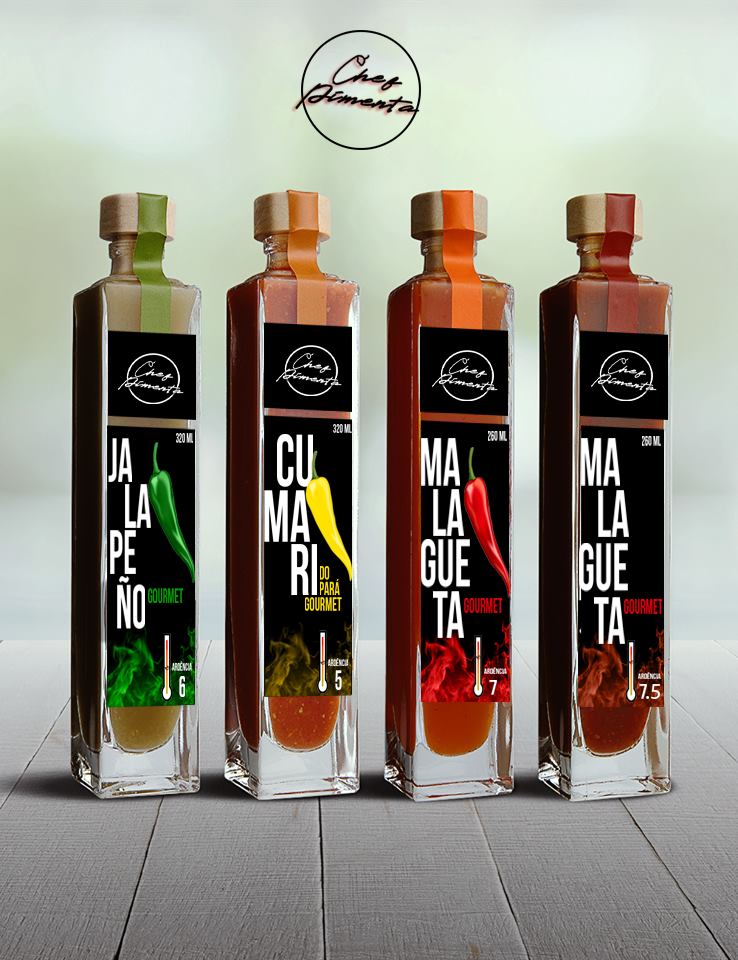
<style>
.page{position:relative;width:738px;height:960px}
.page>*{position:absolute;margin:0}
.t1{font:12.3px "BebasNeueBold";color:#ffffff;scale:0.69 1}
.t2{font:62px "BebasNeueBold";color:#ffffff;scale:0.61 1}
.t3{font:13.3px "BebasNeueBold";color:#ffffff;scale:0.61 1}
.t4{font:73.4px "BebasNeueBold";color:#ffffff;scale:0.69 1}
.t5{font:66.6px "BebasNeueBold";color:#ffffff;scale:0.66 1}
.t6{font:13.4px "BebasNeueBold";color:#ffffff;scale:0.66 1}
.t7{font:19px/15.5px "BebasNeueBold";color:#ffe100;scale:0.69 1}
.t8{font:20.6px "BebasNeueBold";color:#00a000;scale:0.61 1}
.t9{font:19px "BebasNeueBold";color:#ffe100;scale:0.69 1}
.t10{font:20.7px "BebasNeueBold";color:#e2010c;scale:0.66 1}
.t11{font:10.8px "BebasNeueBold";color:#fbfcfb;scale:0.61 1}
.t12{font:10px "BebasNeueBold";color:#f6f5f1;scale:0.69 1}
.t13{font:29.9px "BebasNeueBold";color:#ffffff;scale:0.61 1}
.t14{font:27.5px "BebasNeueBold";color:#ffffff;scale:0.69 1}
.t15{font:7.6px "BebasNeueBold";color:#ffffff}
.t16{font:21px "BebasNeueBold";color:#ffffff}
.t17{font:22px "MyriadPro-Regular";color:#ffffff}
</style>
<div class="page">
<p class="t1" style="left:333px;top:424px;width:19px;height:9px;rotate:2deg">320 ml</p>
<p class="t2" style="left:108px;top:438px;width:24px;height:44px">JA</p>
<p class="t3" style="left:176px;top:433px;width:17px;height:10px">320 ml</p>
<p class="t4" style="left:277px;top:434px;width:36px;height:53px">cu</p>
<p class="t5" style="left:421px;top:438px;width:39px;height:48px">ma</p>
<p class="t6" style="left:488px;top:431px;width:19px;height:10px">260 ml</p>
<p class="t5" style="left:581px;top:438px;width:39px;height:48px">ma</p>
<p class="t6" style="left:642px;top:436px;width:19px;height:10px">260 ml</p>
<p class="t2" style="left:125px;top:484px;width:26px;height:44px">la</p>
<p class="t4" style="left:264px;top:490px;width:46px;height:52px">ma</p>
<p class="t5" style="left:433px;top:489px;width:31px;height:47px">la</p>
<p class="t5" style="left:598px;top:490px;width:31px;height:47px">la</p>
<p class="t2" style="left:110px;top:530px;width:26px;height:44px">PE</p>
<p class="t4" style="left:291px;top:544px;width:26px;height:51px">ri</p>
<p class="t5" style="left:421px;top:539px;width:49px;height:49px">gue</p>
<p class="t5" style="left:579px;top:543px;width:49px;height:49px">gue</p>
<p class="t7" style="left:320px;top:566px;width:20px;height:29px">do <br>pará</p>
<p class="t2" style="left:117px;top:576px;width:28px;height:53px">ÑO</p>
<p class="t8" style="left:148px;top:588px;width:35px;height:15px">gourmet</p>
<p class="t5" style="left:433px;top:591px;width:31px;height:47px">ta</p>
<p class="t9" style="left:305px;top:597px;width:37px;height:14px">gourmet</p>
<p class="t10" style="left:464px;top:598px;width:38px;height:15px">gourmet</p>
<p class="t5" style="left:594px;top:597px;width:31px;height:47px">ta</p>
<p class="t10" style="left:624px;top:599px;width:38px;height:15px">gourmet</p>
<p class="t11" style="left:172px;top:661px;width:20px;height:10px">ardência</p>
<p class="t12" style="left:328px;top:658px;width:20px;height:8px">ardência</p>
<p class="t13" style="left:179px;top:676px;width:6px;height:21px">6</p>
<p class="t14" style="left:335px;top:670px;width:7px;height:20px">5</p>
<p class="t15" style="left:484px;top:667px;width:23px;height:7px">ardência</p>
<p class="t15" style="left:638px;top:672px;width:23px;height:7px">ardência</p>
<p class="t16" style="left:489px;top:680px;width:8px;height:15px">7</p>
<p class="t16" style="left:639px;top:684px;width:8px;height:15px">7</p>
<p class="t17" style="left:646px;top:684px;width:14px;height:15px">.5</p>
</div>
